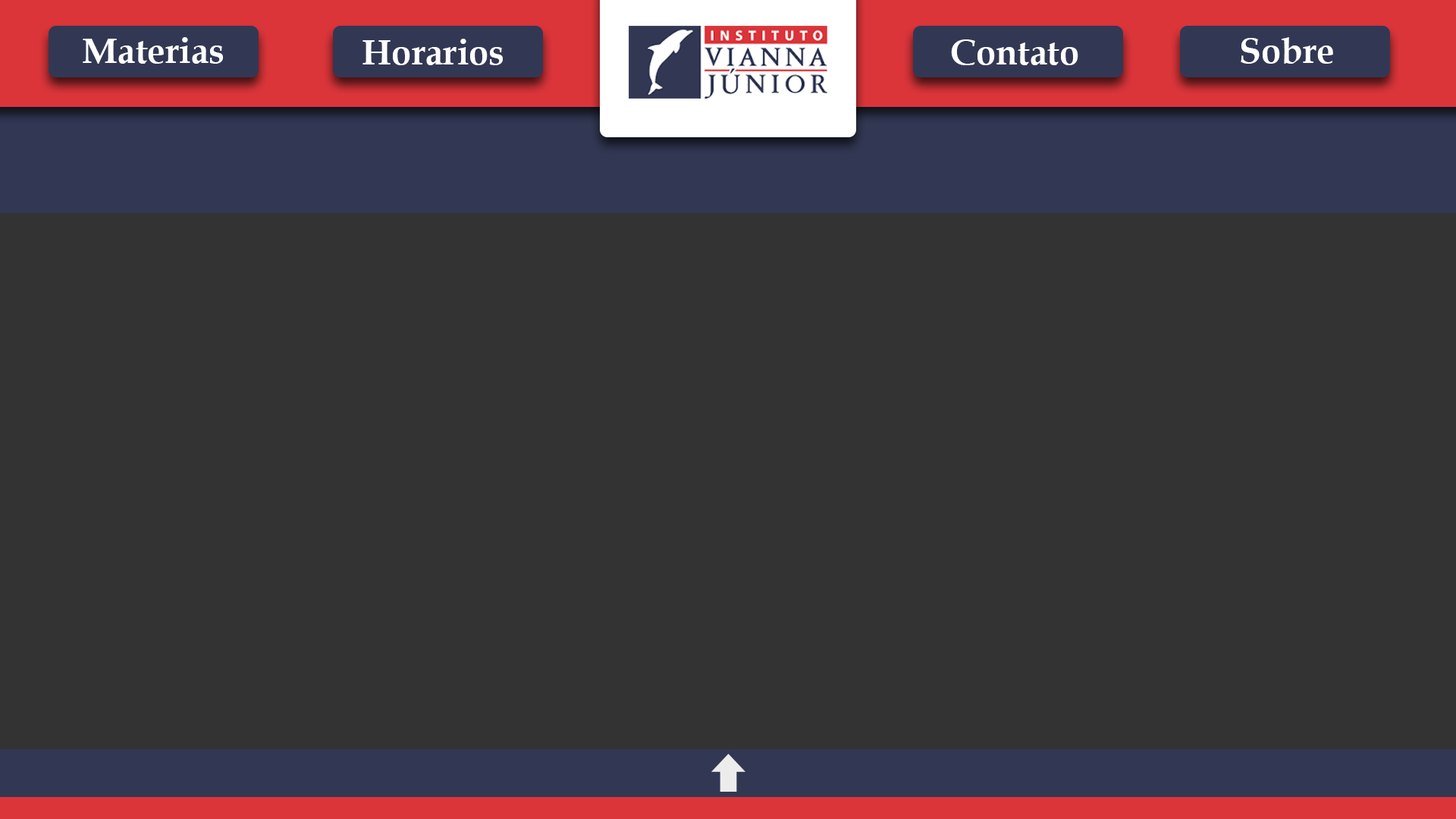
<style>
.page{position:relative;width:1456px;height:819px;background:#333333}
.page>*{position:absolute;margin:0}
.t1{font:35.6px "BookAntiqua-Bold";color:#ffffff}
</style>
<div class="page">
<p class="t1" style="left:83px;top:37px;width:140px;height:27px">Materias</p>
<p class="t1" style="left:362px;top:39px;width:141px;height:26px">Horarios</p>
<p class="t1" style="left:951px;top:39px;width:127px;height:26px">Contato</p>
<p class="t1" style="left:1241px;top:37px;width:92px;height:27px">Sobre</p>
</div>
